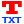
<style>
.page{position:relative;width:24px;height:24px;background:#ffffff}
.page>*{position:absolute;margin:0}
.t1{font:16.4px "BlackoakStd";color:#fc0000;scale:0.67 1}
.t2{font:11px "CopperplateGothic-Bold";color:#0035fc}
</style>
<div class="page">
<p class="t1" style="left:2px;top:1px;width:20px;height:13px">T</p>
<p class="t2" style="left:1px;top:17px;width:21px;height:6px">txt</p>
</div>
